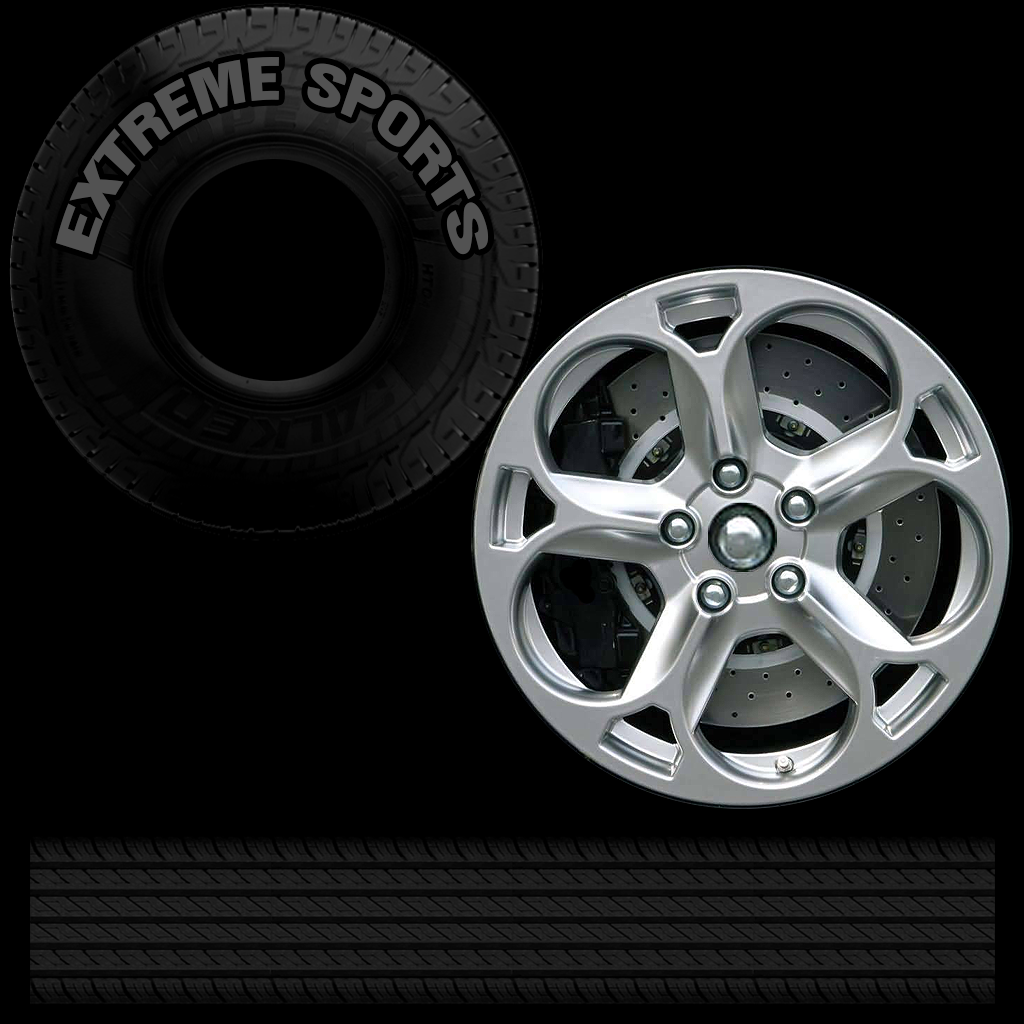
<style>
.page{position:relative;width:1024px;height:1024px;background:#000000}
.page>*{position:absolute;margin:0}
.t1{font:75.2px "Swiss921BT-RegularA";color:#515151;font-variant:small-caps;scale:0.89 1}
</style>
<div class="page">
<p class="t1" style="left:55px;top:57px;width:434px;height:198px">extreme sports</p>
</div>
